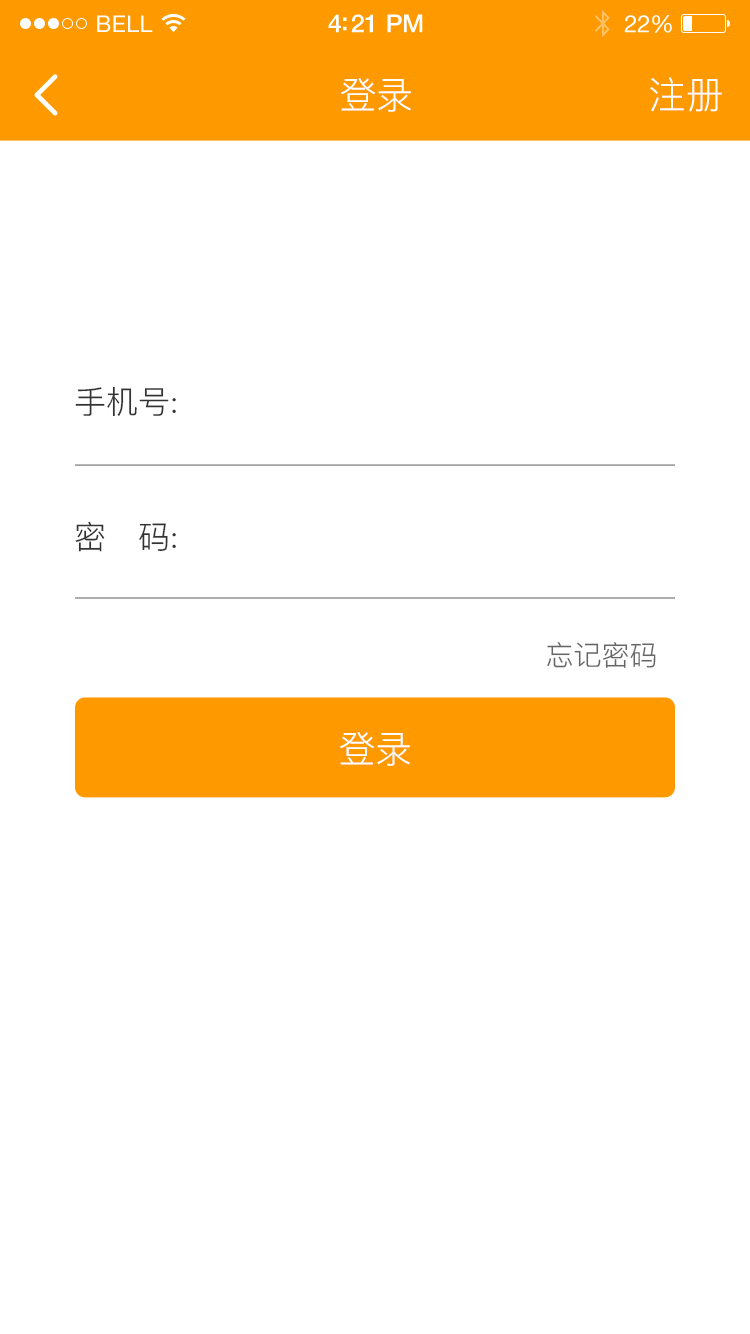
<style>
.page{position:relative;width:750px;height:1334px;background:#ffffff}
.page>*{position:absolute;margin:0}
.t1{font:23px "HelveticaNeue";letter-spacing:0.02em;color:#ffffff}
.t2{font:25px "HelveticaNeue-Medium";letter-spacing:-0.02em;color:#ffffff}
.t3{font:24px "HelveticaNeue";letter-spacing:-0.02em;color:#ffffff}
.t4{font:37.5px "PingFang-SC-Regular";color:#ffffff}
.t5{font:32px "PingFang-SC-Regular";color:#333333}
.t6{font:28px "PingFang-SC-Regular";color:#666666}
</style>
<div class="page">
<p class="t1" style="left:97px;top:15px;width:56px;height:17px">BELL</p>
<p class="t2" style="left:328px;top:14px;width:95px;height:19px">4:21 PM</p>
<p class="t3" style="left:624px;top:15px;width:48px;height:18px">22%</p>
<p class="t4" style="left:340px;top:78px;width:71px;height:34px">登录</p>
<p class="t4" style="left:650px;top:77px;width:72px;height:35px">注册</p>
<p class="t5" style="left:75px;top:386px;width:101px;height:31px">手机号:</p>
<p class="t5" style="left:75px;top:521px;width:101px;height:31px">密   码:</p>
<p class="t6" style="left:547px;top:642px;width:109px;height:26px">忘记密码</p>
<p class="t4" style="left:339px;top:732px;width:71px;height:34px">登录</p>
</div>
